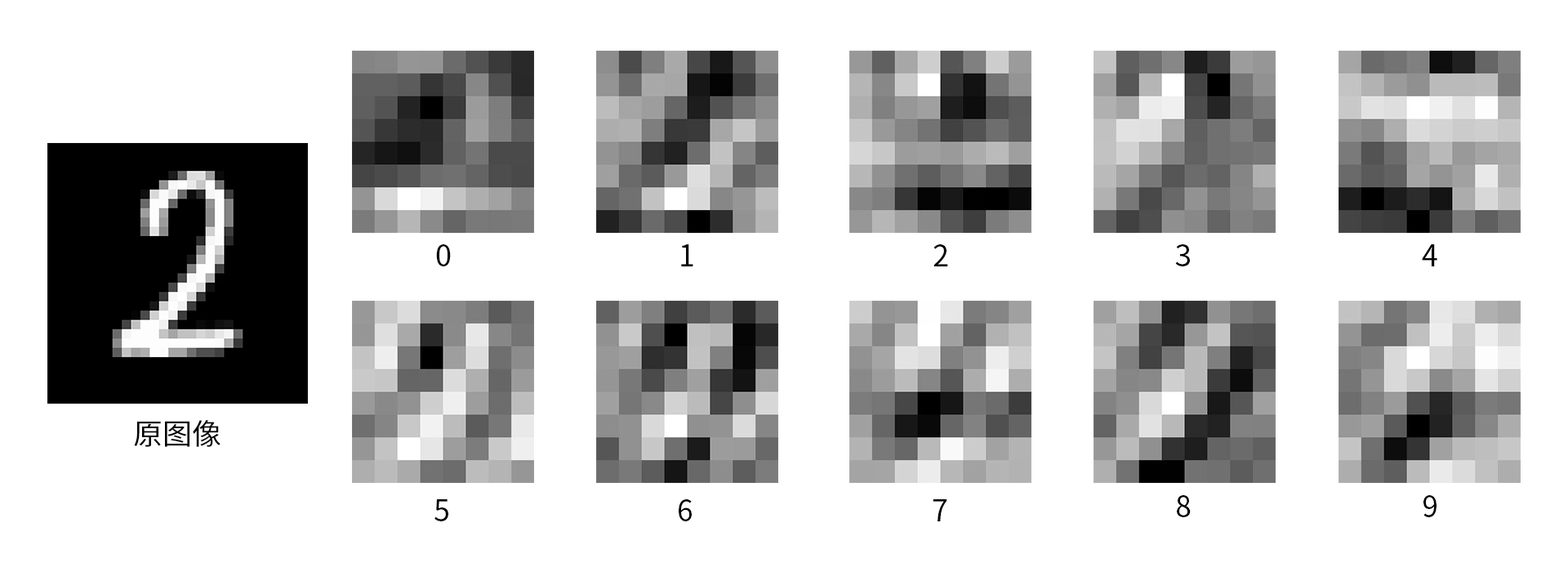
<style>
.page{position:relative;width:1568px;height:572px;background:#ffffff}
.page>*{position:absolute;margin:0}
.t1{font:29.4px "SourceHanSansCN-Regular";color:#000000}
</style>
<div class="page">
<p class="t1" style="left:436px;top:244px;width:15px;height:22px">0</p>
<p class="t1" style="left:681px;top:244px;width:12px;height:22px">1</p>
<p class="t1" style="left:933px;top:244px;width:15px;height:22px">2</p>
<p class="t1" style="left:1175px;top:244px;width:15px;height:22px">3</p>
<p class="t1" style="left:1422px;top:244px;width:15px;height:22px">4</p>
<p class="t1" style="left:134px;top:420px;width:86px;height:27px">原图像</p>
<p class="t1" style="left:1177px;top:495px;width:14px;height:22px">8</p>
<p class="t1" style="left:1423px;top:495px;width:14px;height:22px">9</p>
<p class="t1" style="left:434px;top:499px;width:14px;height:22px">5</p>
<p class="t1" style="left:679px;top:499px;width:13px;height:22px">6</p>
<p class="t1" style="left:933px;top:499px;width:14px;height:22px">7</p>
</div>
